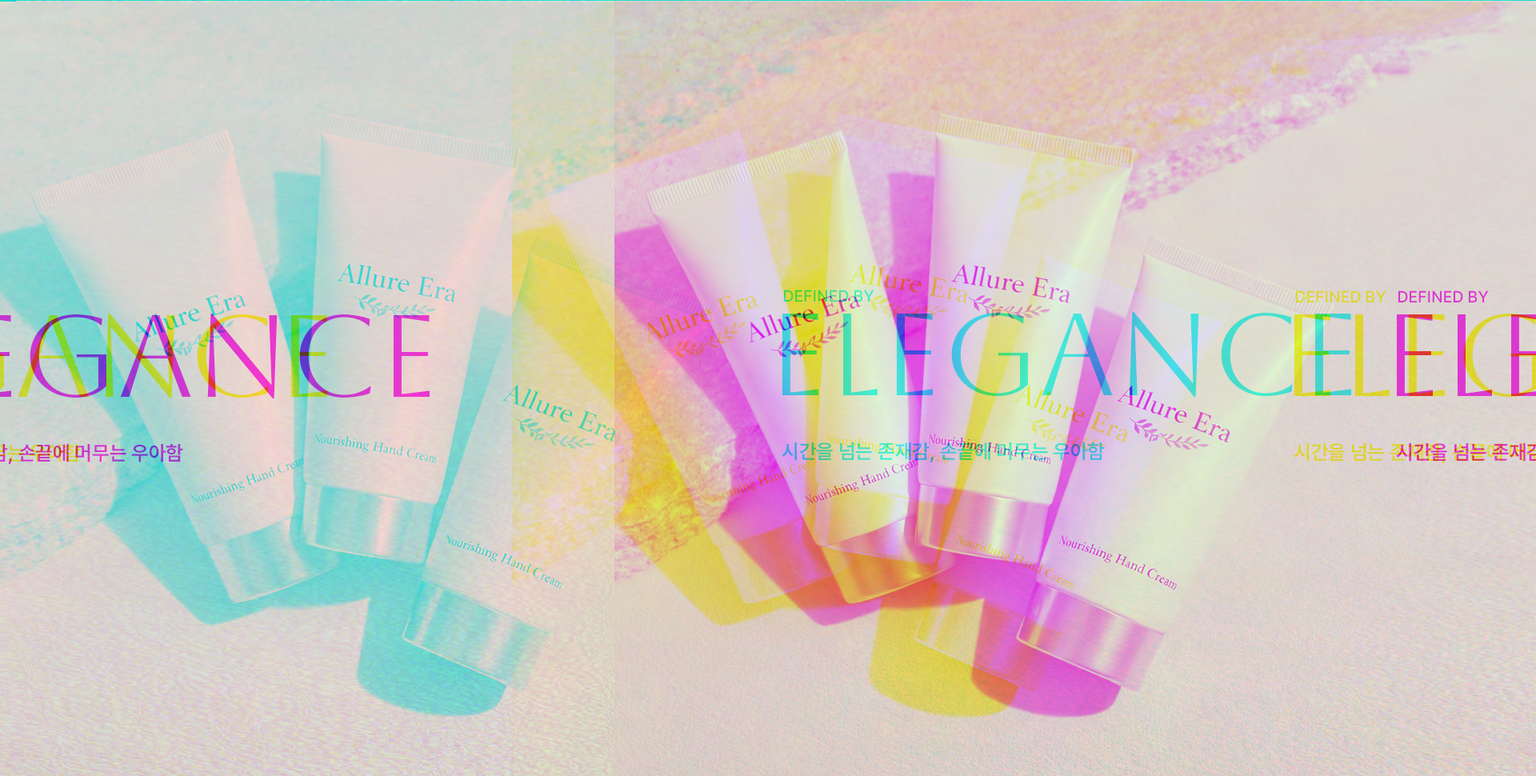
<style>
.page{position:relative;width:1536px;height:776px}
.page>*{position:absolute;margin:0}
.t1{font:16px "Pretendard-Medium";text-transform:uppercase}
.t2{font:116.7px "Aboreto-Regular"}
.t3{font:20px "Pretendard-SemiBold"}
</style>
<div class="page">
<p class="t1" style="left:783px;top:289px;width:92px;height:13px">Defined by</p>
<p class="t2" style="left:782px;top:311px;width:569px;height:85px">Elegance</p>
<p class="t3" style="left:782px;top:442px;width:323px;height:20px">시간을 넘는 존재감, 손끝에 머무는 우아함</p>
</div>
